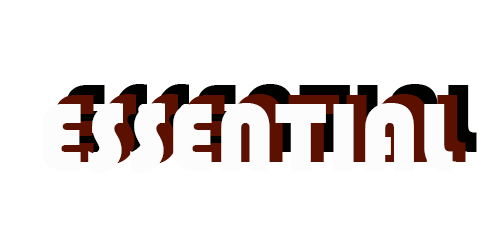
<style>
.page{position:relative;width:500px;height:250px;background:#ffffff}
.page>*{position:absolute;margin:0}
.t1{font:100px "Bauhaus93"}
.t2{font:100px "Bauhaus93";color:#fcfcfc}
</style>
<div class="page">
<p class="t1" style="left:66px;top:84px;width:411px;height:70px">ESSENTIAL</p>
<p class="t2" style="left:42px;top:103px;width:411px;height:70px">ESSENTIAL</p>
</div>
